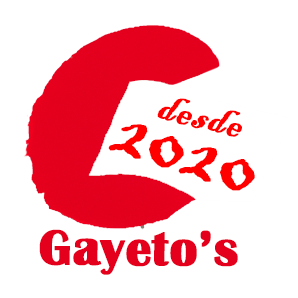
<style>
.page{position:relative;width:298px;height:298px;background:#ffffff}
.page>*{position:absolute;margin:0}
.t1{font:46.7px "BlackadderITC-Regular";color:#ff0000;font-weight:bold}
.t2{font:99.4px "BlackadderITC-Regular";color:#ff0000;font-weight:bold}
.t3{font:50.9px "BritannicBold";color:#e4001d;font-weight:bold}
</style>
<div class="page">
<p class="t1" style="left:157px;top:98px;width:85px;height:39px;rotate:14deg">desde</p>
<p class="t1" style="left:157px;top:98px;width:85px;height:39px;rotate:14deg">desde</p>
<p class="t2" style="left:108px;top:124px;width:147px;height:67px;rotate:18deg">2020</p>
<p class="t2" style="left:108px;top:124px;width:147px;height:67px;rotate:18deg">2020</p>
<p class="t3" style="left:39px;top:229px;width:199px;height:46px">Gayeto’s</p>
<p class="t3" style="left:39px;top:229px;width:199px;height:46px">Gayeto’s</p>
</div>
